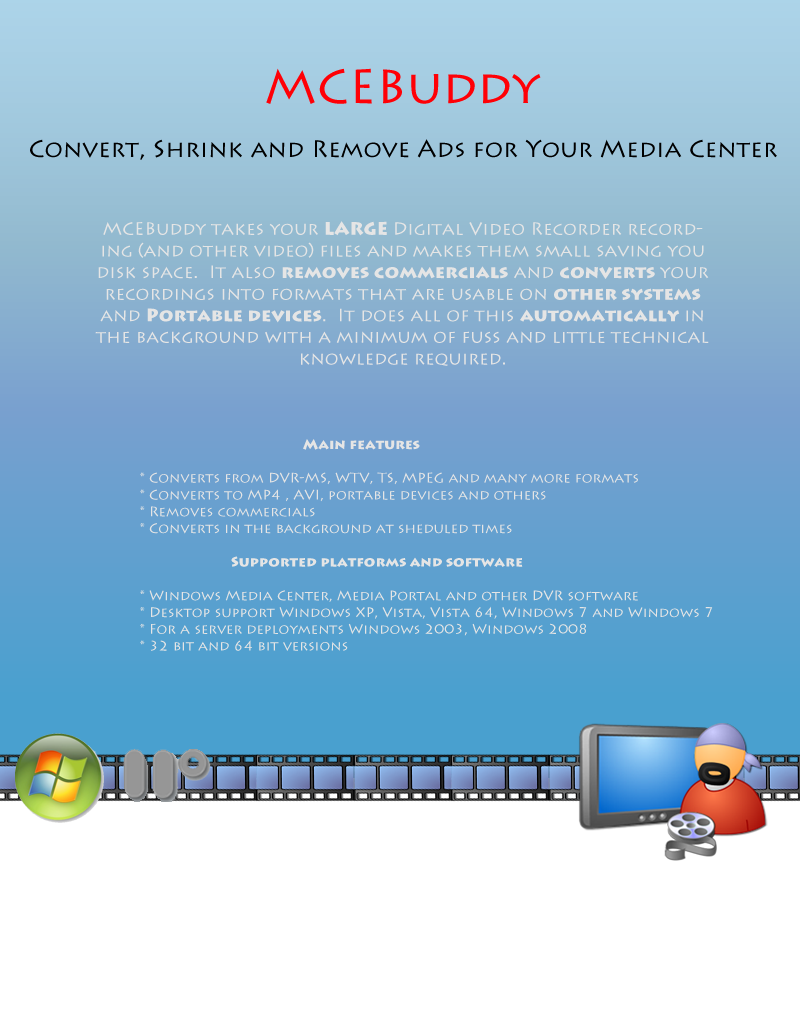
<style>
.page{position:relative;width:800px;height:1010px}
.page>*{position:absolute;margin:0}
.t1{font:48px "LithosPro-Regular";color:#ff0006}
.t2{font:24px "LithosPro-Regular";color:#000000}
.t3{font:18px "LithosPro-Regular";color:#e5e5e5}
.t4{font:18px "LithosPro-Black";color:#e5e5e5}
.t5{font:14px "LithosPro-Regular";color:#e5e5e5}
.t6{font:14px "LithosPro-Black";color:#e5e5e5}
</style>
<div class="page">
<p class="t1" style="left:266px;top:68px;width:275px;height:36px">MCEBuddy</p>
<p class="t2" style="left:30px;top:139px;width:747px;height:21px">Convert, Shrink and Remove Ads for Your Media Center</p>
<p class="t3" style="left:95px;top:221px;width:614px;height:145px;text-align:center">MCEBuddy takes your <span class="t4">LARGE </span>Digital Video Recorder recording (and other video) files and makes them small saving you disk space.  It also <span class="t4">removes commercials</span> and <span class="t4">converts </span>your recordings into formats that are usable on <span class="t4">other systems</span> and <span class="t4">Portable devices</span>.  It does all of this <span class="t4">automatically </span>in the background with a minimum of fuss and little technical knowledge required.</p>
<p class="t5" style="left:140px;top:439px;width:573px;height:212px"><span class="t6">Main features<br></span><br>    * Converts from DVR-MS, WTV, TS, MPEG and many more formats<br>    * Converts to MP4 , AVI, portable devices and others <br>    * Removes commercials<br>    * Converts in the background at sheduled times<br><br>   <span class="t6">Supported platforms and software<br></span><br>    * Windows Media Center, Media Portal and other DVR software<br>    * Desktop support Windows XP, Vista, Vista 64, Windows 7 and Windows 7<br>    * For a server deployments Windows 2003, Windows 2008<br>    * 32 bit and 64 bit versions</p>
</div>
